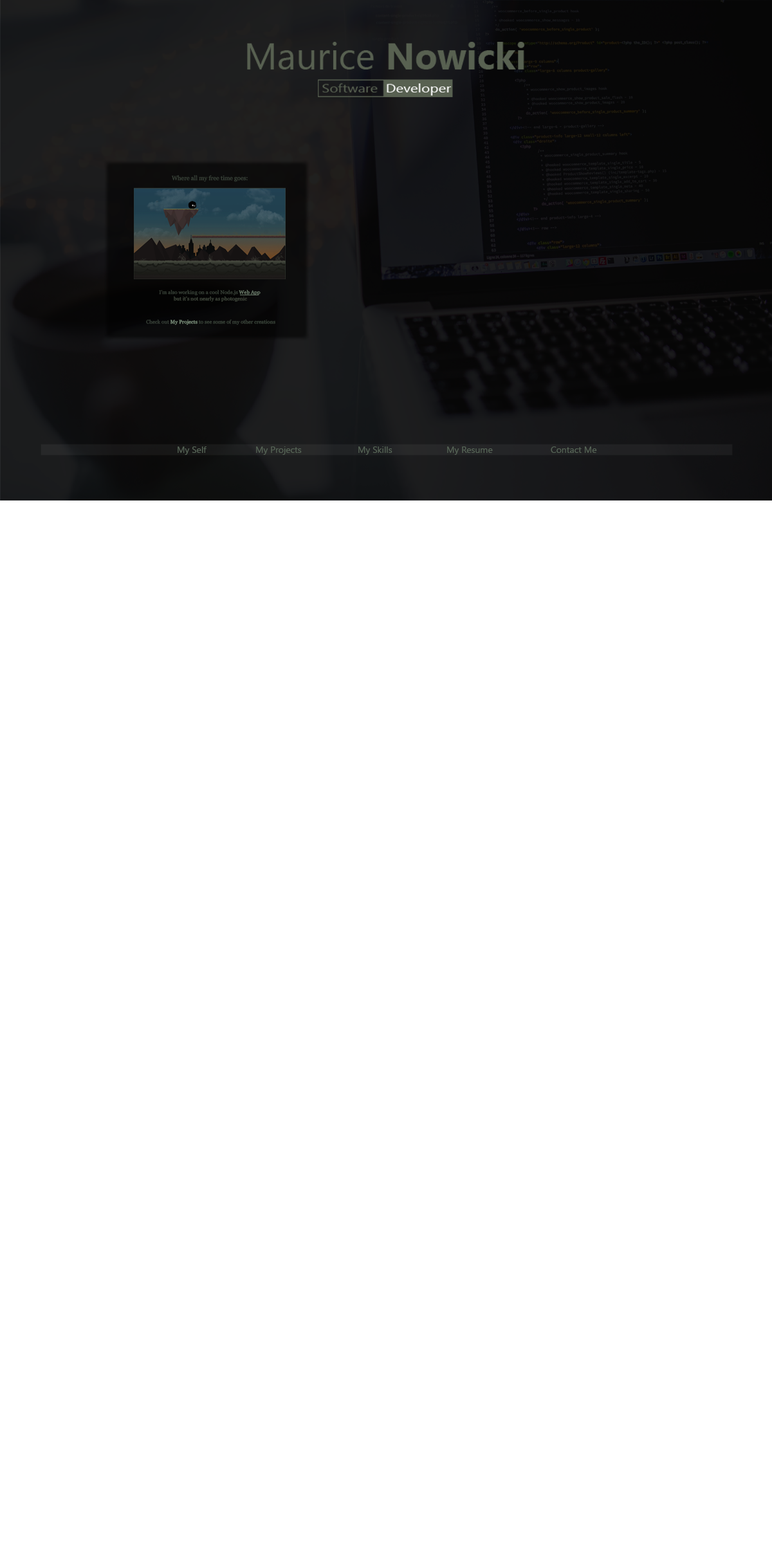
<style>
.page{position:relative;width:772px;height:1544px;background:#ffffff}
.page>*{position:absolute;margin:0}
.t1{font:6.1px "Georgia";color:#374037}
.t2{font:5.2px "Georgia";color:#374037}
.t3{font:5.2px "Georgia";color:#6b7c6b}
.t4{font:5.2px "Georgia";color:#3f463b}
.t5{font:5.2px "Georgia";color:#3a443a}
.t6{font:5.2px "Georgia";color:#7a8e7a}
.t7{font:9px "Gadugi";color:#566456}
</style>
<div class="page">
<p class="t1" style="left:172px;top:175px;width:76px;height:7px">Where all my free time goes:</p>
<p class="t2" style="left:159px;top:290px;width:102px;height:12px;text-align:center">I’m also working on a cool Node.js <span class="t3">Web App <br></span><span class="t4">but it’s not nearly as photogenic</span></p>
<p class="t5" style="left:146px;top:319px;width:129px;height:6px"><span class="t2">Check out </span><span class="t6">My Projects </span>to see some of my other creations</p>
<p class="t7" style="left:178px;top:447px;width:29px;height:8px">My Self</p>
<p class="t7" style="left:256px;top:447px;width:46px;height:8px">My Projects</p>
<p class="t7" style="left:358px;top:447px;width:35px;height:8px">My Skills</p>
<p class="t7" style="left:447px;top:447px;width:46px;height:8px">My Resume</p>
<p class="t7" style="left:551px;top:447px;width:46px;height:6px">Contact Me</p>
</div>
